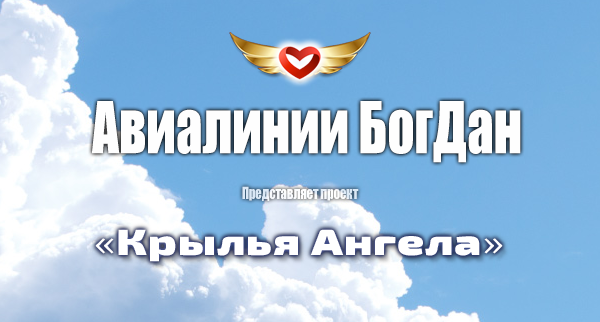
<style>
.page{position:relative;width:600px;height:322px}
.page>*{position:absolute;margin:0}
.t1{font:66.1px "Impact";color:#fefefe;scale:0.8 1}
.t2{font:15.5px "Impact";scale:0.8 1}
</style>
<div class="page">
<p class="t1" style="left:92px;top:101px;width:429px;height:62px">Авиалинии БогДан</p>
<p class="t2" style="left:242px;top:186px;width:117px;height:15px">Представляет проект</p>
</div>
